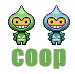
<style>
.page{position:relative;width:75px;height:74px;background:#ffffff}
.page>*{position:absolute;margin:0}
.t1{font:25.9px "Impact";color:#71aa59;font-weight:bold}
</style>
<div class="page">
<p class="t1" style="left:11px;top:48px;width:55px;height:21px">coop</p>
</div>
